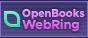
<style>
.page{position:relative;width:88px;height:38px}
.page>*{position:absolute;margin:0}
.t1{font:11px/12px "Metropolis-ExtraBold"}
.t2{font:13px/12px "Metropolis-Bold"}
</style>
<div class="page">
<p class="t1" style="left:22px;top:8px;width:63px;height:24px">OpenBooks<br><span class="t2">WebRing</span></p>
<p class="t1" style="left:22px;top:8px;width:63px;height:24px">OpenBooks<br><span class="t2">WebRing</span></p>
</div>
